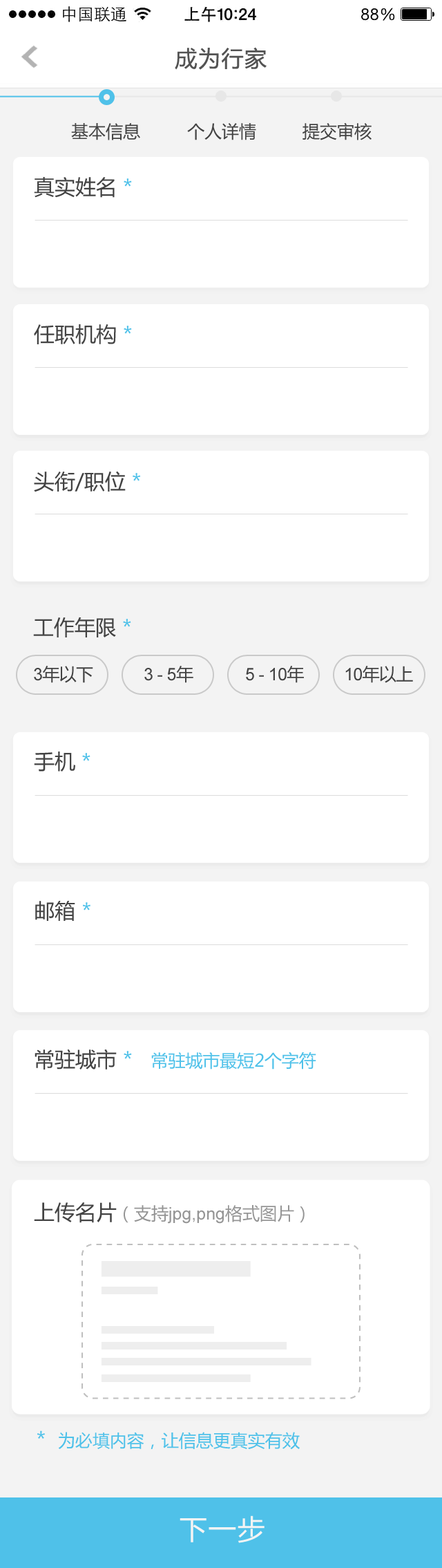
<style>
.page{position:relative;width:442px;height:1568px;background:#ffffff}
.page>*{position:absolute;margin:0}
.t1{font:22.1px "MicrosoftYaHei";letter-spacing:0.05em;color:#535353}
.t2{font:17.3px "MicrosoftYaHei";color:#434343}
.t3{font:20.7px "MicrosoftYaHei";color:#434343}
.t4{font:20.7px "MicrosoftYaHei";color:#4fc1e9}
.t5{font:17.3px "MicrosoftYaHei";letter-spacing:-0.025em;color:#434343}
.t6{font:17.3px "ArialMT";letter-spacing:-0.025em;color:#434343}
.t7{font:17.3px "MicrosoftYaHei";color:#4fc1e9}
.t8{font:17.3px "ArialMT";color:#959595}
.t9{font:17.3px "MicrosoftYaHei";color:#959595}
.t10{font:27.7px "MicrosoftYaHei";letter-spacing:0.05em;color:#f4f4f4}
</style>
<div class="page">
<p class="t1" style="left:175px;top:47px;width:92px;height:23px">成为行家</p>
<p class="t2" style="left:71px;top:123px;width:69px;height:17px">基本信息</p>
<p class="t2" style="left:187px;top:123px;width:69px;height:17px">个人详情</p>
<p class="t2" style="left:303px;top:122px;width:69px;height:18px">提交审核</p>
<p class="t3" style="left:34px;top:177px;width:98px;height:21px">真实姓名 <span class="t4">*</span></p>
<p class="t3" style="left:34px;top:324px;width:98px;height:20px">任职机构 <span class="t4">*</span></p>
<p class="t3" style="left:34px;top:471px;width:107px;height:21px">头衔/职位 <span class="t4">*</span></p>
<p class="t3" style="left:33px;top:617px;width:98px;height:20px">工作年限 <span class="t4">*</span></p>
<p class="t5" style="left:34px;top:666px;width:59px;height:17px"><span class="t6">3</span>年以下</p>
<p class="t6" style="left:144px;top:666px;width:50px;height:17px">3 - 5<span class="t5">年</span></p>
<p class="t6" style="left:246px;top:666px;width:58px;height:17px">5 - 10<span class="t5">年</span></p>
<p class="t5" style="left:346px;top:666px;width:67px;height:17px"><span class="t6">10</span>年以上</p>
<p class="t3" style="left:34px;top:752px;width:57px;height:20px">手机 <span class="t4">*</span></p>
<p class="t3" style="left:35px;top:901px;width:56px;height:20px">邮箱 <span class="t4">*</span></p>
<p class="t7" style="left:35px;top:1049px;width:282px;height:21px"><span class="t3">常驻城市 </span><span class="t4">*   </span>常驻城市最短2个字符</p>
<p class="t8" style="left:34px;top:1202px;width:271px;height:22px"><span class="t3">上传名片</span><span class="t9">（支持</span>jpg,png<span class="t9">格式图片）</span></p>
<p class="t7" style="left:37px;top:1430px;width:263px;height:20px"><span class="t4">*  </span>为必填内容，让信息更真实有效</p>
<p class="t10" style="left:180px;top:1515px;width:85px;height:28px">下一步</p>
</div>
